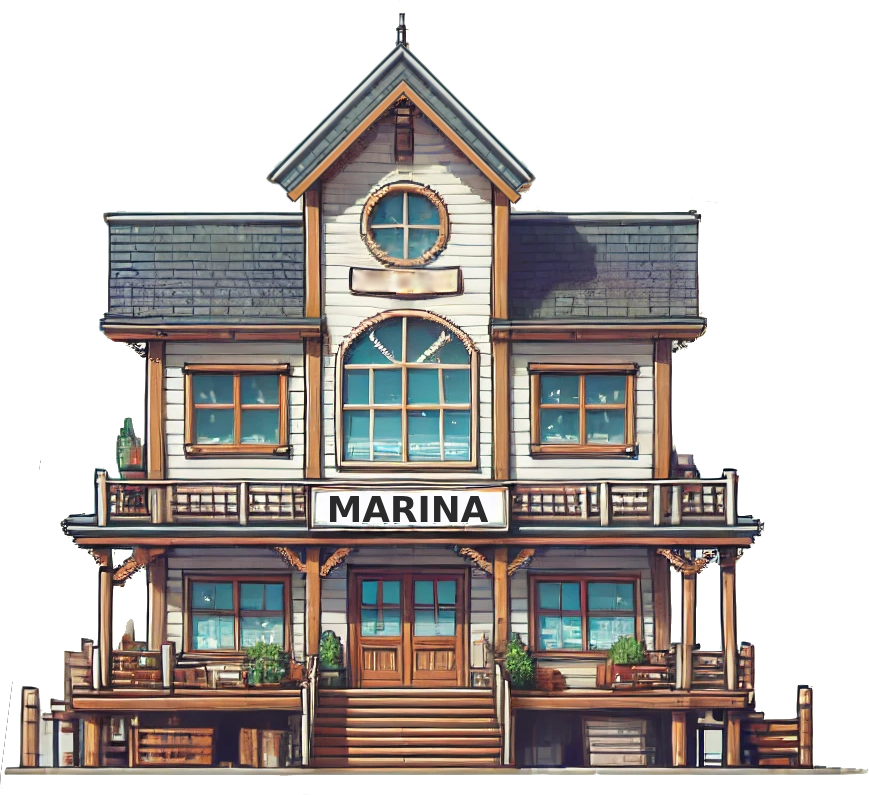
<style>
.page{position:relative;width:869px;height:795px;background:#ffffff}
.page>*{position:absolute;margin:0}
.t1{font:35.7px "DejaVuSans-Bold";color:#2a2a2b}
</style>
<div class="page">
<p class="t1" style="left:330px;top:495px;width:159px;height:27px">MARINA</p>
</div>
